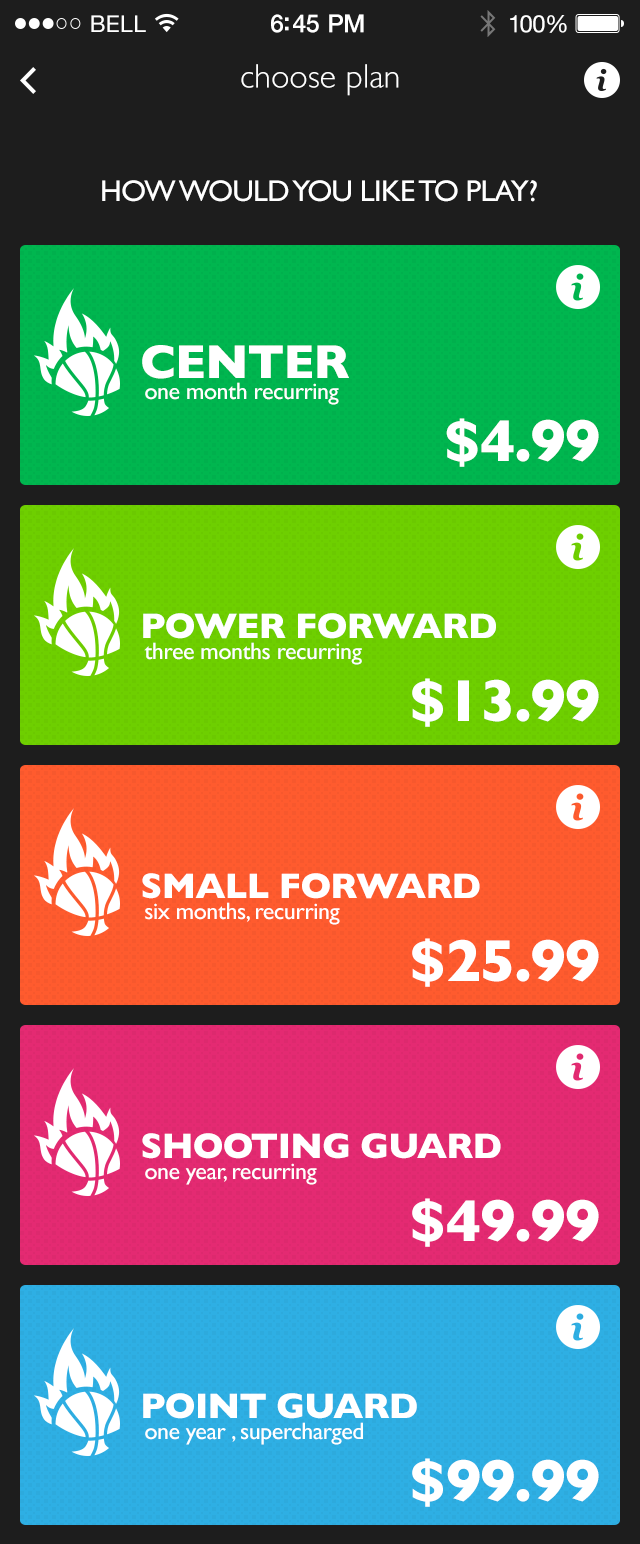
<style>
.page{position:relative;width:640px;height:1544px;background:#1d1d1d}
.page>*{position:absolute;margin:0}
.t1{font:34px "GillSans-Light";color:#ffffff}
.t2{font:30px "GillSans";letter-spacing:-0.02em;color:#ffffff;text-transform:uppercase}
.t3{font:48px "GillSans-Bold";letter-spacing:-0.02em;color:#ffffff;text-transform:uppercase}
.t4{font:24px "GillSans";letter-spacing:-0.02em;color:#ffffff}
.t5{font:60px "GillSans-Bold";letter-spacing:-0.02em;color:#ffffff}
.t6{font:36px "GillSans-Bold";letter-spacing:-0.02em;color:#ffffff;text-transform:uppercase}
</style>
<div class="page">
<p class="t1" style="left:241px;top:64px;width:158px;height:32px">choose plan</p>
<p class="t2" style="left:102px;top:180px;width:435px;height:22px">how would you like to play?</p>
<p class="t3" style="left:142px;top:345px;width:207px;height:34px">CENTER</p>
<p class="t4" style="left:145px;top:382px;width:194px;height:23px">one month recurring</p>
<p class="t5" style="left:446px;top:418px;width:153px;height:49px">$4.99</p>
<p class="t6" style="left:143px;top:613px;width:353px;height:26px">power forward</p>
<p class="t4" style="left:144px;top:642px;width:218px;height:23px">three months recurring</p>
<p class="t5" style="left:412px;top:678px;width:187px;height:49px">$13.99</p>
<p class="t6" style="left:142px;top:873px;width:338px;height:26px">Small forward</p>
<p class="t4" style="left:145px;top:902px;width:195px;height:23px">six months, recurring</p>
<p class="t5" style="left:412px;top:938px;width:187px;height:49px">$25.99</p>
<p class="t6" style="left:142px;top:1133px;width:359px;height:26px">shooting guard</p>
<p class="t4" style="left:145px;top:1163px;width:172px;height:22px">one year, recurring</p>
<p class="t5" style="left:412px;top:1198px;width:187px;height:49px">$49.99</p>
<p class="t6" style="left:143px;top:1393px;width:274px;height:26px">point guard</p>
<p class="t4" style="left:145px;top:1422px;width:218px;height:23px">one year , supercharged</p>
<p class="t5" style="left:412px;top:1458px;width:187px;height:49px">$99.99</p>
</div>
